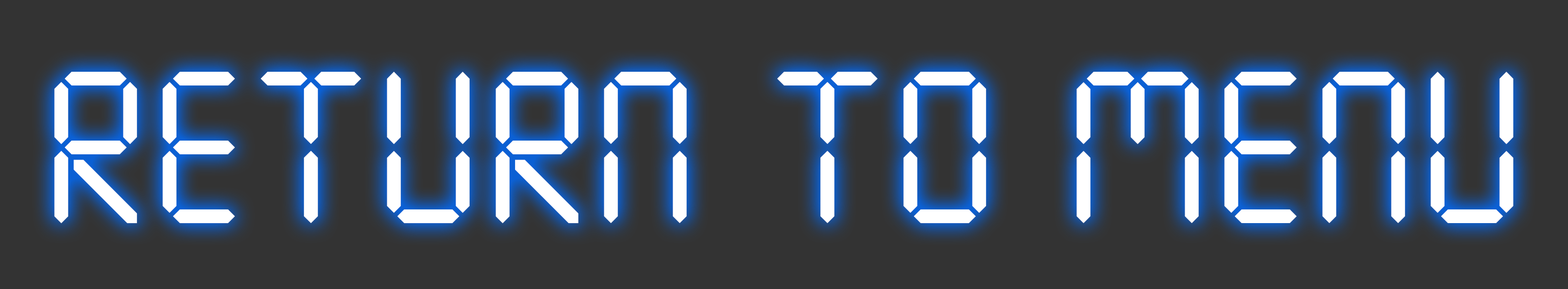
<style>
.page{position:relative;width:1568px;height:289px;background:#333333}
.page>*{position:absolute;margin:0}
.t1{font:215.9px "SevenSegmentRegular";color:#ffffff}
</style>
<div class="page">
<p class="t1" style="left:54px;top:72px;width:1459px;height:151px">Return to menu</p>
</div>
